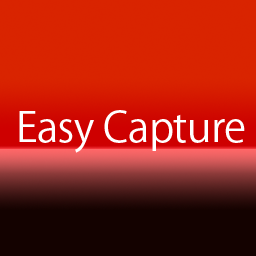
<style>
.page{position:relative;width:256px;height:256px;background:#d92400}
.page>*{position:absolute;margin:0}
.t1{font:41px "KozGoPr6N-Regular";letter-spacing:-0.015em;color:#ffffff}
</style>
<div class="page">
<p class="t1" style="left:19px;top:110px;width:226px;height:43px">Easy Capture</p>
</div>
